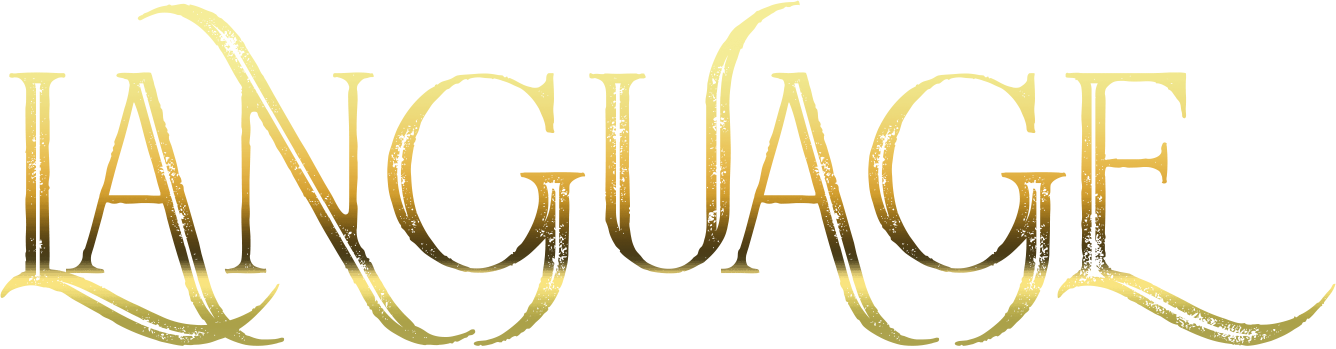
<style>
.page{position:relative;width:1336px;height:349px;background:#ffffff}
.page>*{position:absolute;margin:0}
.t1{font:350px "QueenInlineGrunge"}
</style>
<div class="page">
<p class="t1" style="left:0px;top:0px;width:1336px;height:346px">LANGUAGE</p>
</div>
